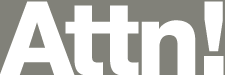
<style>
.page{position:relative;width:225px;height:75px;background:#ffffff}
.page>*{position:absolute;margin:0}
.t1{font:103.4px "HelveticaNeueLTStd-Hv";letter-spacing:-0.025em;color:#ffffff}
</style>
<div class="page">
<p class="t1" style="left:0px;top:1px;width:224px;height:75px">Attn!</p>
</div>
